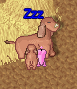
<style>
.page{position:relative;width:77px;height:89px;background:#9c7245}
.page>*{position:absolute;margin:0}
.t1{font:12px "ArialMT";color:#0000ff}
</style>
<div class="page">
<p class="t1" style="left:24px;top:9px;width:19px;height:16px">Zzz</p>
</div>
